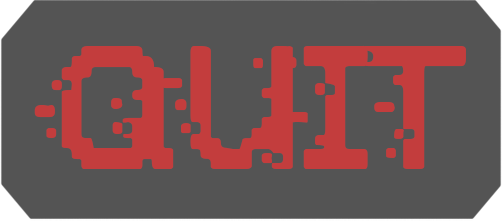
<style>
.page{position:relative;width:502px;height:221px;background:#545454}
.page>*{position:absolute;margin:0}
.t1{font:175.4px "PositiveSystem";color:#c33d3d}
</style>
<div class="page">
<p class="t1" style="left:34px;top:45px;width:432px;height:124px">Quit</p>
</div>
